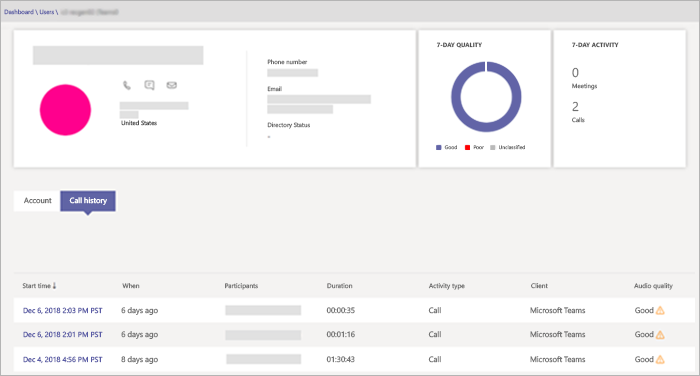
<style>
.page{position:relative;width:700px;height:376px;background:#ffffff}
.page>*{position:absolute;margin:0}
.t1{font:6.1px "SegoeUI";color:#6264a7}
.t2{font:6.1px "SegoeUI-Bold";color:#505050}
.t3{font:6.1px "SegoeUI";color:#707070}
.t4{font:12.7px "SegoeUI";color:#707070}
.t5{font:6.1px "SegoeUI";color:#505050}
.t6{font:5.1px "SegoeUI";color:#707070}
.t7{font:7.6px "SegoeUI";color:#707070}
.t8{font:7.6px "SegoeUI";color:#ffffff}
.t9{font:6.6px "SegoeUI";color:#757575}
.t10{font:7.3px "SegoeUI";color:#5a5ca6}
.t11{font:7.7px "SegoeUI";color:#757575}
</style>
<div class="page">
<p class="t1" style="left:4px;top:9px;width:55px;height:6px">Dashboard \ Users \</p>
<p class="t2" style="left:436px;top:42px;width:46px;height:6px">7-DAY QUALITY</p>
<p class="t2" style="left:572px;top:42px;width:47px;height:6px">7-DAY ACTIVITY</p>
<p class="t3" style="left:267px;top:59px;width:41px;height:6px">Phone number</p>
<p class="t4" style="left:572px;top:67px;width:7px;height:11px">0</p>
<p class="t3" style="left:267px;top:86px;width:15px;height:6px">Email</p>
<p class="t3" style="left:572px;top:83px;width:25px;height:7px">Meetings</p>
<p class="t4" style="left:572px;top:101px;width:7px;height:11px">2</p>
<p class="t5" style="left:121px;top:120px;width:36px;height:6px">United States</p>
<p class="t3" style="left:267px;top:122px;width:43px;height:7px">Directory Status</p>
<p class="t3" style="left:572px;top:117px;width:13px;height:6px">Calls</p>
<p class="t6" style="left:444px;top:145px;width:13px;height:5px">Good</p>
<p class="t6" style="left:473px;top:145px;width:11px;height:5px">Poor</p>
<p class="t6" style="left:499px;top:145px;width:26px;height:5px">Unclassified</p>
<p class="t7" style="left:24px;top:197px;width:28px;height:7px">Account</p>
<p class="t8" style="left:69px;top:197px;width:38px;height:8px">Call history</p>
<p class="t9" style="left:22px;top:283px;width:29px;height:6px">Start time</p>
<p class="t9" style="left:122px;top:283px;width:18px;height:6px">When</p>
<p class="t9" style="left:225px;top:283px;width:33px;height:7px">Participants</p>
<p class="t9" style="left:327px;top:283px;width:26px;height:6px">Duration</p>
<p class="t9" style="left:428px;top:283px;width:37px;height:7px">Activity type</p>
<p class="t9" style="left:531px;top:283px;width:17px;height:6px">Client</p>
<p class="t9" style="left:634px;top:283px;width:39px;height:7px">Audio quality</p>
<p class="t10" style="left:23px;top:307px;width:80px;height:8px">Dec 6, 2018 2:03 PM PST</p>
<p class="t11" style="left:121px;top:307px;width:37px;height:8px">6 days ago</p>
<p class="t11" style="left:326px;top:307px;width:29px;height:7px">00:00:35</p>
<p class="t11" style="left:428px;top:307px;width:13px;height:7px">Call</p>
<p class="t11" style="left:530px;top:307px;width:56px;height:7px">Microsoft Teams</p>
<p class="t11" style="left:635px;top:307px;width:19px;height:7px">Good</p>
<p class="t10" style="left:23px;top:331px;width:80px;height:8px">Dec 6, 2018 2:01 PM PST</p>
<p class="t11" style="left:121px;top:331px;width:37px;height:8px">6 days ago</p>
<p class="t11" style="left:326px;top:331px;width:29px;height:7px">00:01:16</p>
<p class="t11" style="left:428px;top:331px;width:13px;height:7px">Call</p>
<p class="t11" style="left:530px;top:331px;width:56px;height:7px">Microsoft Teams</p>
<p class="t11" style="left:635px;top:331px;width:19px;height:7px">Good</p>
<p class="t10" style="left:23px;top:356px;width:80px;height:8px">Dec 4, 2018 4:56 PM PST</p>
<p class="t11" style="left:121px;top:356px;width:37px;height:8px">8 days ago</p>
<p class="t11" style="left:326px;top:356px;width:29px;height:7px">01:30:43</p>
<p class="t11" style="left:428px;top:356px;width:13px;height:7px">Call</p>
<p class="t11" style="left:530px;top:356px;width:56px;height:7px">Microsoft Teams</p>
<p class="t11" style="left:635px;top:356px;width:19px;height:7px">Good</p>
</div>
